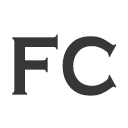
<style>
.page{position:relative;width:128px;height:128px;background:#ffffff}
.page>*{position:absolute;margin:0}
.t1{font:85.8px "CopperplateGothic-Bold";color:#373737;scale:0.83 1}
</style>
<div class="page">
<p class="t1" style="left:12px;top:34px;width:105px;height:62px">FC</p>
</div>
